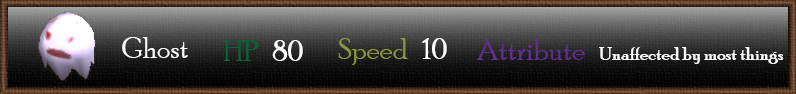
<style>
.page{position:relative;width:796px;height:94px}
.page>*{position:absolute;margin:0}
.t1{font:30px "PoorRichard-Regular";color:#ffffff}
.t2{font:30px "PoorRichard-Regular";color:#006738}
.t3{font:30px "PoorRichard-Regular";color:#8c9839}
.t4{font:19px "PoorRichard-Regular";color:#ffffff}
.t5{font:30px "PoorRichard-Regular";color:#622d91}
</style>
<div class="page">
<p class="t1" style="left:122px;top:37px;width:66px;height:21px">Ghost</p>
<p class="t2" style="left:223px;top:40px;width:80px;height:21px">HP<span class="t1">   80</span></p>
<p class="t3" style="left:338px;top:38px;width:109px;height:27px">Speed   <span class="t1">10</span></p>
<p class="t4" style="left:476px;top:39px;width:308px;height:25px"><span class="t5">Attribute   </span>Unaffected by most things</p>
</div>
